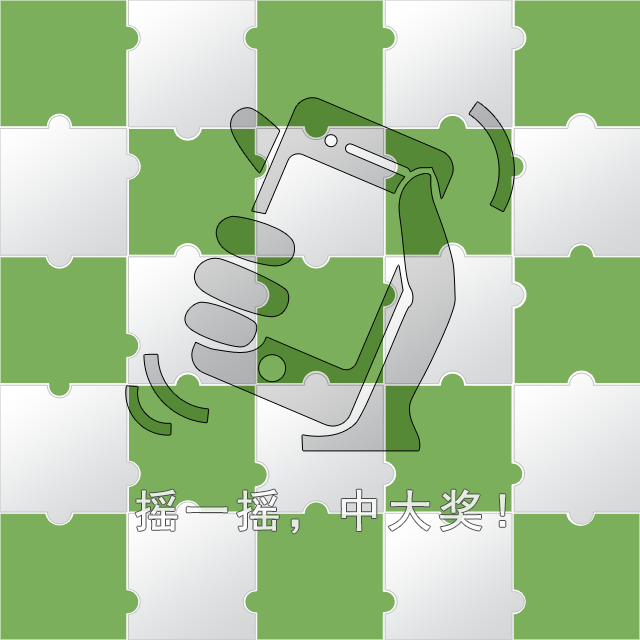
<style>
.page{position:relative;width:640px;height:640px;background:#7baf5b}
.page>*{position:absolute;margin:0}
.t1{font:45px "SimHei";letter-spacing:0.1em;color:#eaf2e6;font-weight:bold}
</style>
<div class="page">
<p class="t1" style="left:135px;top:489px;width:371px;height:45px">摇一摇，中大奖！</p>
</div>
